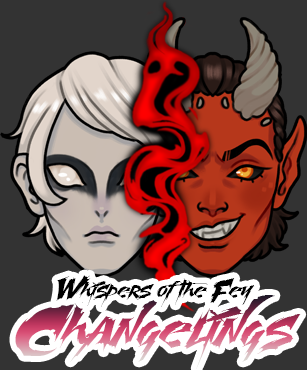
<style>
.page{position:relative;width:307px;height:370px;background:#333333}
.page>*{position:absolute;margin:0}
.t1{font:24px "MartyricPersonalUseOnly";color:#000000}
.t2{font:60px "MartyricPersonalUseOnly"}
</style>
<div class="page">
<p class="t1" style="left:56px;top:275px;width:199px;height:32px">Whispers of the Fey</p>
<p class="t2" style="left:15px;top:295px;width:286px;height:74px">Changelings</p>
</div>
